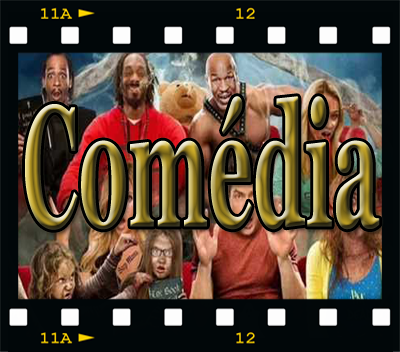
<style>
.page{position:relative;width:400px;height:352px}
.page>*{position:absolute;margin:0}
.t1{font:172px "Vani-Bold";scale:0.46 1}
</style>
<div class="page">
<p class="t1" style="left:25px;top:96px;width:355px;height:134px">Comédia</p>
</div>
